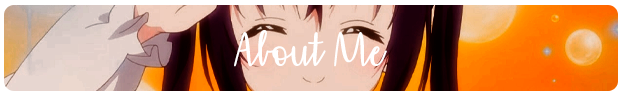
<style>
.page{position:relative;width:622px;height:96px}
.page>*{position:absolute;margin:0}
.t1{font:48px "AffectionatelyYours";color:#ffffff}
</style>
<div class="page">
<p class="t1" style="left:234px;top:30px;width:153px;height:37px">About Me</p>
</div>
